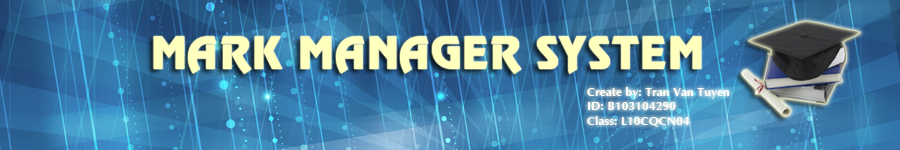
<style>
.page{position:relative;width:900px;height:150px}
.page>*{position:absolute;margin:0}
.t1{font:40px "Vf-Revue-Black";color:#ffffbe}
.t2{font:12px "Andong-Bold";color:#fef9f9}
</style>
<div class="page">
<p class="t1" style="left:153px;top:36px;width:549px;height:38px">MARK MANAGER SYSTEM</p>
<p class="t2" style="left:587px;top:87px;width:143px;height:40px">Create by: Tran Van Tuyen <br>ID: B103104290<br>Class: L10CQCN04</p>
</div>
